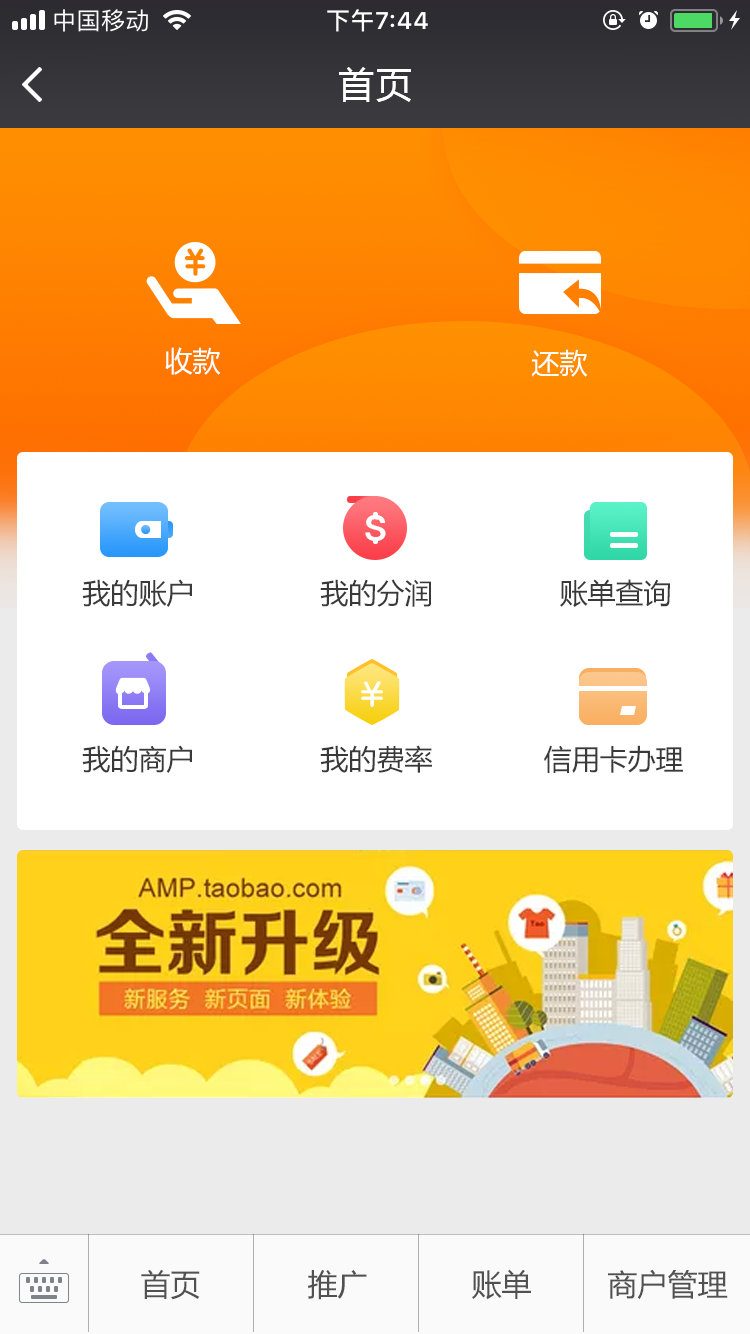
<style>
.page{position:relative;width:750px;height:1334px;background:#ffffff}
.page>*{position:absolute;margin:0}
.t1{font:36px "MicrosoftYaHei";letter-spacing:0.08em;color:#ffffff}
.t2{font:28px "MicrosoftYaHei";color:#ffffff}
.t3{font:47px "Roboto-Regular";color:#ffffff}
.t4{font:28px "MicrosoftYaHei";color:#3b3a3a}
.t5{font:28px "MicrosoftYaHei";color:#3a3939}
.t6{font:30px "MicrosoftYaHei";color:#515151}
</style>
<div class="page">
<p class="t1" style="left:339px;top:67px;width:72px;height:35px">首页</p>
<p class="t2" style="left:165px;top:347px;width:56px;height:28px">收款</p>
<p class="t2" style="left:531px;top:349px;width:57px;height:28px">还款</p>
<p class="t3" style="left:365px;top:515px;width:21px;height:26px">s</p>
<p class="t4" style="left:82px;top:579px;width:110px;height:28px">我的账户</p>
<p class="t5" style="left:320px;top:579px;width:111px;height:28px">我的分润</p>
<p class="t5" style="left:560px;top:579px;width:110px;height:28px">账单查询</p>
<p class="t5" style="left:82px;top:745px;width:110px;height:28px">我的商户</p>
<p class="t5" style="left:320px;top:745px;width:112px;height:28px">我的费率</p>
<p class="t5" style="left:544px;top:745px;width:139px;height:28px">信用卡办理</p>
<p class="t6" style="left:141px;top:1269px;width:59px;height:31px">首页</p>
<p class="t6" style="left:308px;top:1270px;width:59px;height:30px">推广</p>
<p class="t6" style="left:472px;top:1269px;width:59px;height:31px">账单</p>
<p class="t6" style="left:608px;top:1269px;width:120px;height:31px">商户管理</p>
</div>
